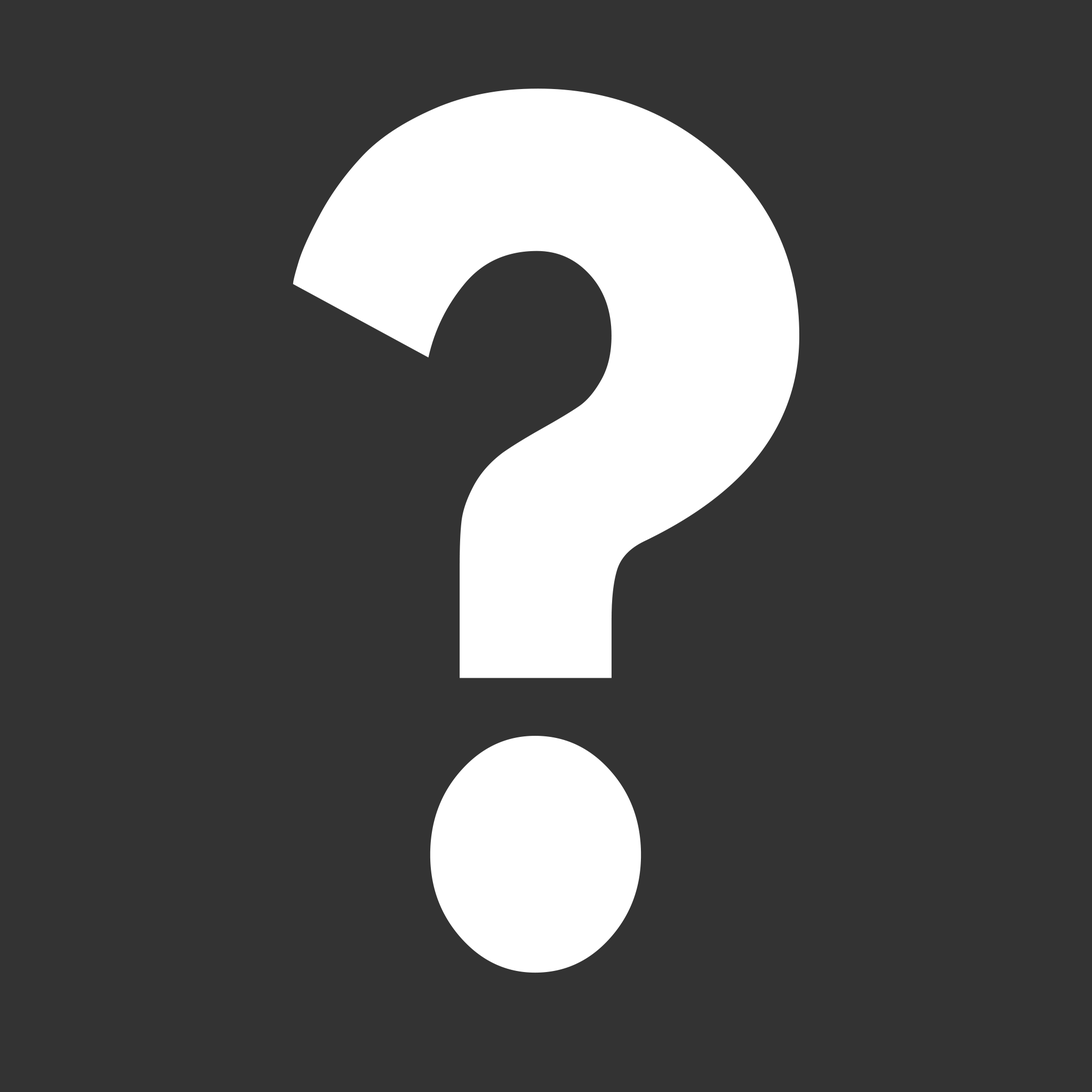
<style>
.page{position:relative;width:1092px;height:1092px;background:#333333}
.page>*{position:absolute;margin:0}
.t1{font:1033.8px "LeagueSpartan-Bold";color:#ffffff;scale:0.89 1}
</style>
<div class="page">
<p class="t1" style="left:293px;top:89px;width:506px;height:884px">?</p>
</div>
